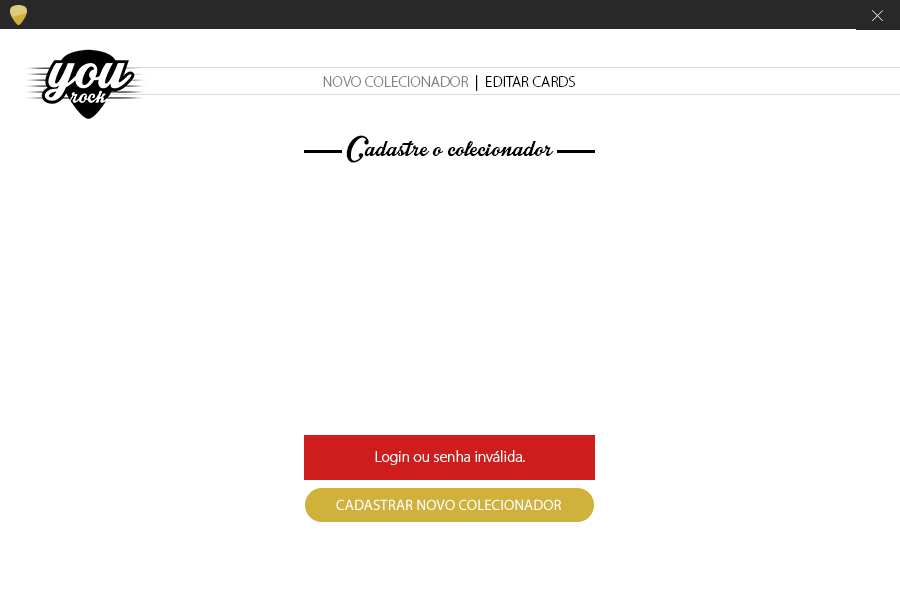
<style>
.page{position:relative;width:900px;height:600px;background:#ffffff}
.page>*{position:absolute;margin:0}
.t1{font:15.6px "MyriadPro-Light";color:#808080}
.t2{font:15.6px "MyriadPro-Light";color:#000000}
.t3{font:35px "IntriqueScriptPersonalUse";letter-spacing:0.005em;color:#000000}
.t4{font:15.6px "MyriadPro-Light";letter-spacing:0.005em;color:#ffffff}
.t5{font:15px "MyriadPro-Regular";color:#ffffff}
</style>
<div class="page">
<p class="t1" style="left:323px;top:75px;width:252px;height:16px">NOVO COLECIONADOR  <span class="t2">|  EDITAR CARDS</span></p>
<p class="t3" style="left:346px;top:135px;width:208px;height:28px">Cadastre o colecionador</p>
<p class="t4" style="left:375px;top:450px;width:150px;height:15px">Login ou senha inválida.</p>
<p class="t5" style="left:336px;top:499px;width:225px;height:11px">CADASTRAR NOVO COLECIONADOR</p>
</div>
